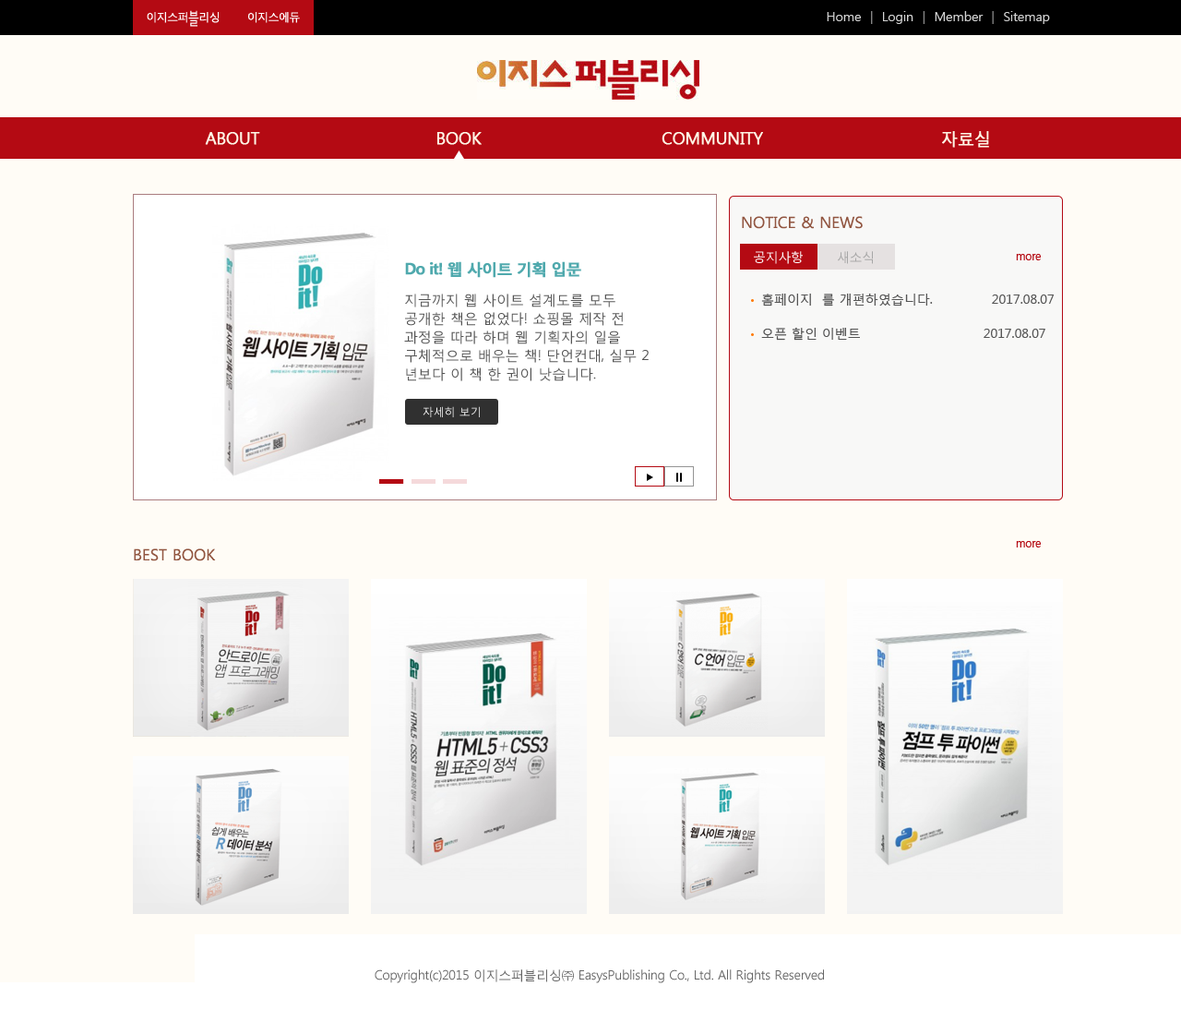
<style>
.page{position:relative;width:1181px;height:1010px;background:#fffcf6}
.page>*{position:absolute;margin:0}
.t1{font:11.1px "MalgunGothicRegular";letter-spacing:-0.05em;color:#ffffff}
.t2{font:16.6px "MalgunGothicRegular";letter-spacing:-0.05em;color:#ffffff;scale:0.67 1}
.t3{font:12.9px "MalgunGothicRegular";letter-spacing:-0.01em;color:#d4d4d4}
.t4{font:12.9px "MalgunGothicRegular";letter-spacing:-0.01em;color:#858585}
.t5{font:16.6px "MalgunGothicRegular";letter-spacing:-0.025em;color:#fff7e6;font-weight:bold}
.t6{font:15.7px "MalgunGothicRegular";color:#915540}
.t7{font:12.9px "MalgunGothicRegular";letter-spacing:-0.025em;color:#ffffff}
.t8{font:12.9px "MalgunGothicRegular";letter-spacing:-0.025em;color:#a6a6a6}
.t9{font:11.1px "MalgunGothicRegular";letter-spacing:-0.025em;color:#b40a13}
.t10{font:15.7px "MalgunGothicBold";letter-spacing:-0.075em;color:#4fa9ad;font-weight:bold}
.t11{font:13.8px/18.5px "MalgunGothicRegular";letter-spacing:-0.005em;color:#555555}
.t12{font:12.9px/34.1px "MalgunGothicRegular";color:#555555}
.t13{font:11.1px "MalgunGothicRegular";letter-spacing:-0.005em;color:#ffffff}
.t14{font:12.9px "MalgunGothicRegular";letter-spacing:-0.025em;color:#666666}
</style>
<div class="page">
<p class="t1" style="left:147px;top:10px;width:73px;height:17px">이지스퍼<span class="t2">블</span>리싱</p>
<p class="t1" style="left:248px;top:12px;width:52px;height:11px">이지스에듀</p>
<p class="t3" style="left:827px;top:11px;width:223px;height:13px">Home  <span class="t4">|</span>  Login  <span class="t4">|</span>  Member  <span class="t4">|</span>  Sitemap</p>
<p class="t5" style="left:205px;top:132px;width:55px;height:13px">ABOUT</p>
<p class="t5" style="left:436px;top:132px;width:46px;height:13px">BOOK</p>
<p class="t5" style="left:662px;top:132px;width:101px;height:13px">COMMUNITY</p>
<p class="t5" style="left:942px;top:131px;width:47px;height:17px">자료실</p>
<p class="t6" style="left:742px;top:216px;width:121px;height:13px">NOTICE &amp; NEWS</p>
<p class="t7" style="left:754px;top:251px;width:49px;height:13px">공지사항</p>
<p class="t7" style="left:754px;top:251px;width:49px;height:13px">공지사항</p>
<p class="t8" style="left:838px;top:251px;width:35px;height:13px">새소식</p>
<p class="t9" style="left:1016px;top:254px;width:25px;height:6px">more</p>
<p class="t10" style="left:405px;top:261px;width:176px;height:17px">Do it! 웹 사이트 기획 입문</p>
<p class="t11" style="left:404px;top:293px;width:245px;height:88px">지금까지 웹 사이트 설계도를 모두 공개한 책은 없었다! 쇼핑몰 제작 전 과정을 따라 하며 웹 기획자의 일을 구체적으로 배우는 책! 단언컨대, 실무 2년보다 이 책 한 권이 낫습니다.</p>
<p class="t12" style="left:761px;top:293px;width:294px;height:48px">홈페이지  를 개편하였습니다.             2017.08.07<br>오픈 할인 이벤트                           2017.08.07</p>
<p class="t13" style="left:423px;top:406px;width:57px;height:11px">자세히 보기</p>
<p class="t9" style="left:1016px;top:541px;width:25px;height:6px">more</p>
<p class="t6" style="left:134px;top:548px;width:82px;height:13px">BEST BOOK</p>
<p class="t14" style="left:375px;top:969px;width:449px;height:14px">Copyright(c)2015 이지스퍼블리싱㈜ EasysPublishing Co., Ltd. All Rights Reserved</p>
</div>
